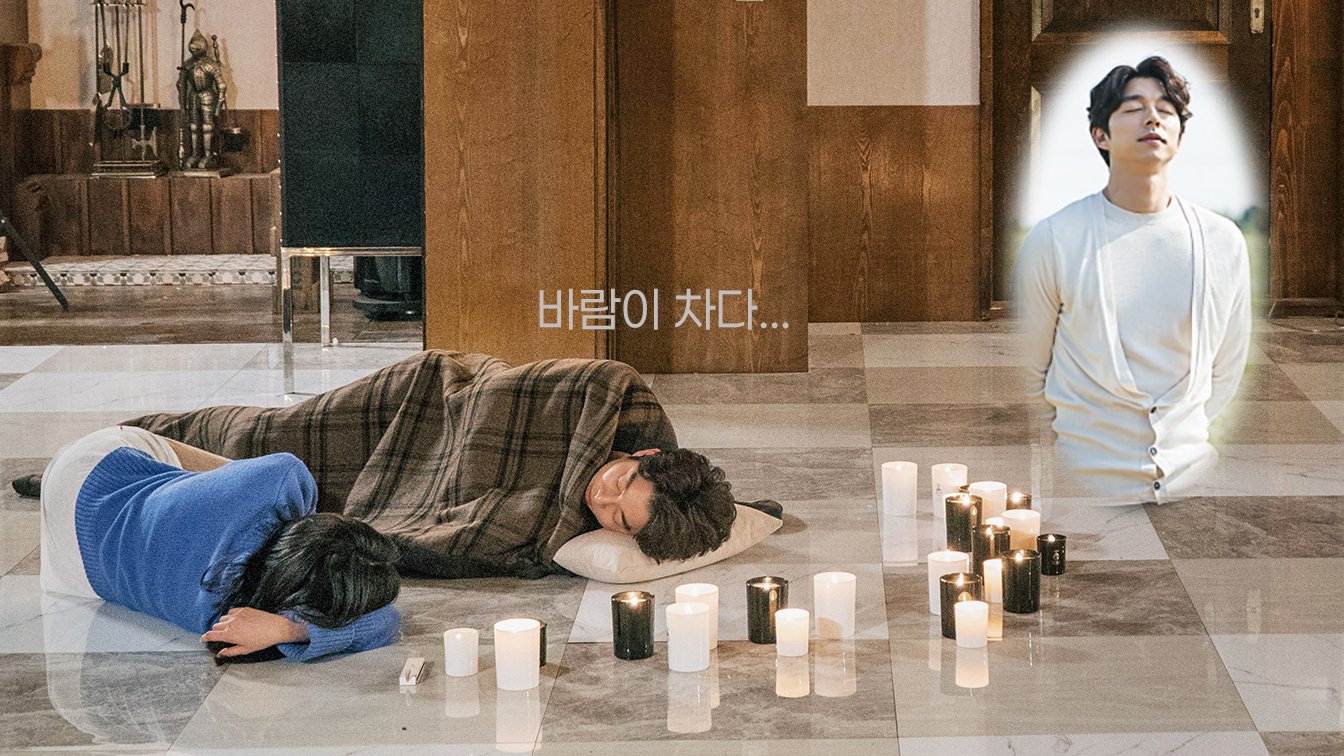
<style>
.page{position:relative;width:1344px;height:756px}
.page>*{position:absolute;margin:0}
.t1{font:48px "Paperlogy-4Regular";color:#c1bdba}
</style>
<div class="page">
<p class="t1" style="left:539px;top:288px;width:250px;height:42px">바람이 차다...</p>
</div>
